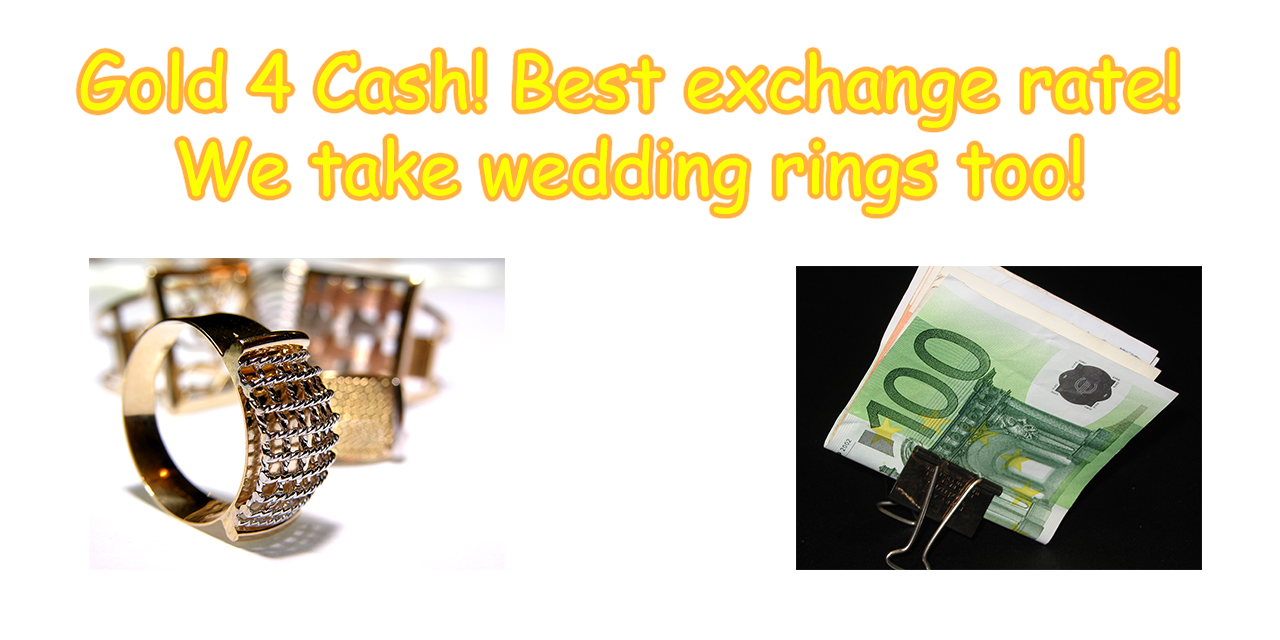
<style>
.page{position:relative;width:1280px;height:640px;background:#ffffff}
.page>*{position:absolute;margin:0}
.t1{font:72px "ComicSansMS";color:#fcff00}
</style>
<div class="page">
<p class="t1" style="left:80px;top:51px;width:1096px;height:163px;text-align:center">Gold 4 Cash! Best exchange rate!<br>We take wedding rings too!</p>
</div>
